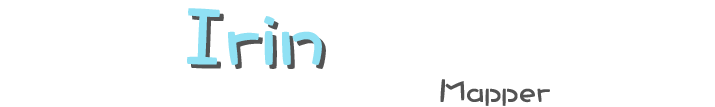
<style>
.page{position:relative;width:715px;height:107px;background:#ffffff}
.page>*{position:absolute;margin:0}
.t1{font:80px "DFCraftYu-W7-WING-RKSJ-H";color:#90e1f4}
.t2{font:80px "DFCraftYu-W7-WING-RKSJ-H"}
.t3{font:32px "DFCraftYu-W7-WING-RKSJ-H";color:#535353}
</style>
<div class="page">
<p class="t1" style="left:187px;top:8px;width:135px;height:57px">Irin</p>
<p class="t2" style="left:191px;top:12px;width:135px;height:57px">Irin</p>
<p class="t3" style="left:440px;top:79px;width:110px;height:27px">Mapper</p>
</div>
